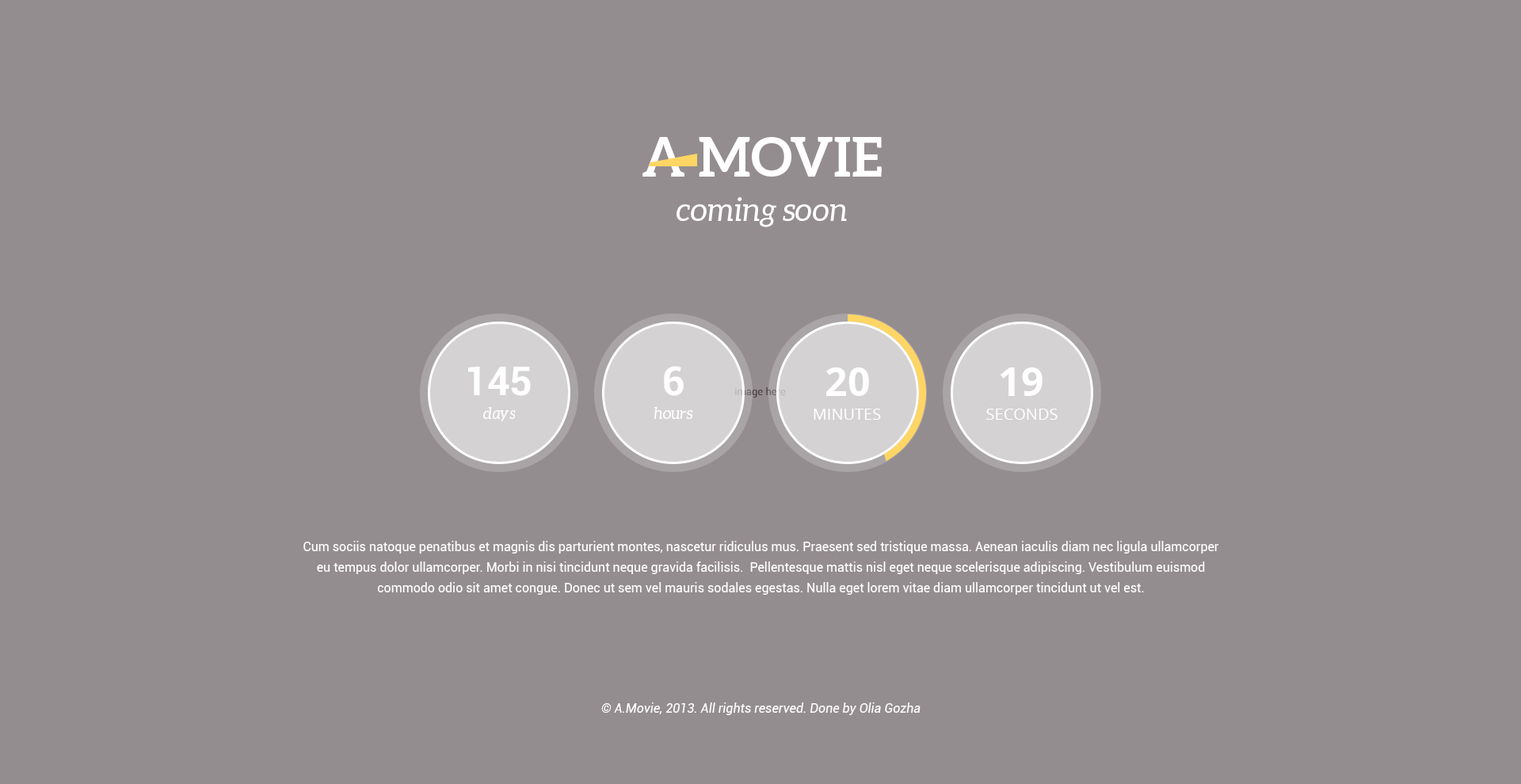
<style>
.page{position:relative;width:1521px;height:784px;background:#948d8f}
.page>*{position:absolute;margin:0}
.t1{font:31.7px/44.4px "Aleo-Italic";color:#ffffff}
.t2{font:53.9px/44.4px "Aleo-Bold";color:#ffffff;text-transform:uppercase}
.t3{font:39.6px "Roboto-Bold";color:#ffffff;text-transform:uppercase}
.t4{font:39.6px "OpenSans-Bold";color:#ffffff;text-transform:uppercase}
.t5{font:10.3px "Roboto-Regular"}
.t6{font:15.8px "Aleo-Italic";color:#ffffff}
.t7{font:15.8px "OpenSans";color:#ffffff;text-transform:uppercase}
.t8{font:12.7px/20.6px "Roboto-Regular";color:#ffffff}
.t9{font:12.7px "Roboto-Italic";color:#ffffff}
</style>
<div class="page">
<p class="t1" style="left:642px;top:137px;width:240px;height:90px;text-align:center"><span class="t2">A Movie<br></span>coming soon</p>
<p class="t3" style="left:468px;top:366px;width:63px;height:30px">145</p>
<p class="t3" style="left:664px;top:366px;width:20px;height:30px">6</p>
<p class="t4" style="left:826px;top:368px;width:43px;height:28px">20</p>
<p class="t4" style="left:1000px;top:368px;width:42px;height:28px">19</p>
<p class="t5" style="left:735px;top:387px;width:51px;height:11px">image here</p>
<p class="t6" style="left:483px;top:407px;width:33px;height:14px">days</p>
<p class="t6" style="left:654px;top:407px;width:39px;height:12px">hours</p>
<p class="t7" style="left:813px;top:409px;width:68px;height:11px">minutes</p>
<p class="t7" style="left:986px;top:409px;width:71px;height:11px">seconds</p>
<p class="t8" style="left:303px;top:541px;width:916px;height:54px;text-align:center">Cum sociis natoque penatibus et magnis dis parturient montes, nascetur ridiculus mus. Praesent sed tristique massa. Aenean iaculis diam nec ligula ullamcorper eu tempus dolor ullamcorper. Morbi in nisi tincidunt neque gravida facilisis.  Pellentesque mattis nisl eget neque scelerisque adipiscing. Vestibulum euismod commodo odio sit amet congue. Donec ut sem vel mauris sodales egestas. Nulla eget lorem vitae diam ullamcorper tincidunt ut vel est.</p>
<p class="t9" style="left:601px;top:703px;width:319px;height:12px">© A.Movie, 2013. All rights reserved. Done by Olia Gozha</p>
</div>
